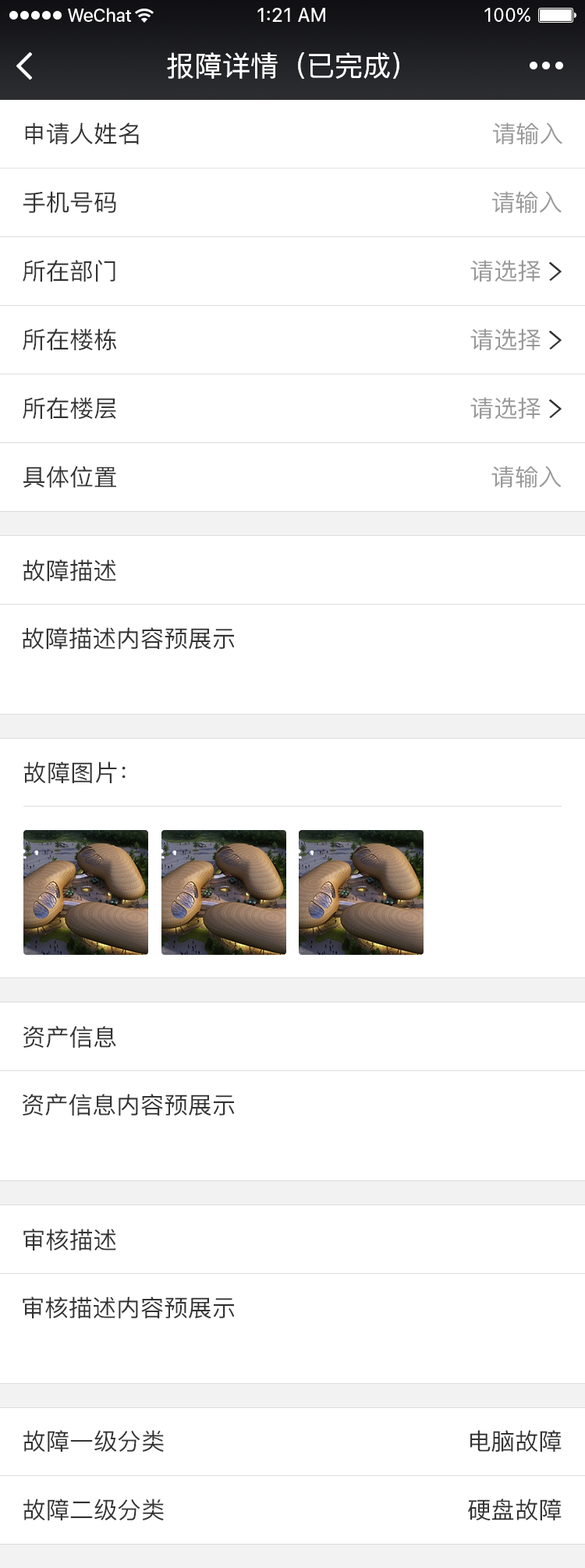
<style>
.page{position:relative;width:585px;height:1568px;background:#ffffff}
.page>*{position:absolute;margin:0}
.t1{font:28.1px "PingFang-SC-Medium";color:#ffffff}
.t2{font:23.4px "PingFang-SC-Medium";color:#333333}
.t3{font:23.4px "PingFang-SC-Medium";color:#999999}
.t4{font:23.3px "PingFang-SC-Medium";color:#333333}
</style>
<div class="page">
<p class="t1" style="left:167px;top:52px;width:232px;height:27px">报障详情（已完成）</p>
<p class="t2" style="left:25px;top:122px;width:114px;height:22px">申请人姓名</p>
<p class="t3" style="left:493px;top:122px;width:69px;height:22px">请输入</p>
<p class="t2" style="left:23px;top:191px;width:93px;height:22px">手机号码</p>
<p class="t3" style="left:492px;top:191px;width:70px;height:22px">请输入</p>
<p class="t2" style="left:23px;top:260px;width:92px;height:22px">所在部门</p>
<p class="t3" style="left:470px;top:260px;width:71px;height:22px">请选择</p>
<p class="t2" style="left:23px;top:328px;width:94px;height:22px">所在楼栋</p>
<p class="t3" style="left:470px;top:328px;width:71px;height:22px">请选择</p>
<p class="t2" style="left:23px;top:397px;width:93px;height:22px">所在楼层</p>
<p class="t3" style="left:470px;top:397px;width:71px;height:22px">请选择</p>
<p class="t2" style="left:23px;top:466px;width:93px;height:22px">具体位置</p>
<p class="t3" style="left:491px;top:466px;width:71px;height:22px">请输入</p>
<p class="t2" style="left:23px;top:559px;width:93px;height:22px">故障描述</p>
<p class="t2" style="left:22px;top:627px;width:213px;height:23px">故障描述内容预展示</p>
<p class="t4" style="left:23px;top:761px;width:103px;height:22px">故障图片：</p>
<p class="t2" style="left:23px;top:1026px;width:93px;height:22px">资产信息</p>
<p class="t2" style="left:23px;top:1094px;width:212px;height:22px">资产信息内容预展示</p>
<p class="t2" style="left:23px;top:1229px;width:93px;height:21px">审核描述</p>
<p class="t2" style="left:23px;top:1297px;width:212px;height:22px">审核描述内容预展示</p>
<p class="t2" style="left:23px;top:1430px;width:141px;height:22px">故障一级分类</p>
<p class="t2" style="left:470px;top:1430px;width:92px;height:22px">电脑故障</p>
<p class="t2" style="left:23px;top:1499px;width:141px;height:21px">故障二级分类</p>
<p class="t2" style="left:468px;top:1499px;width:94px;height:21px">硬盘故障</p>
</div>
